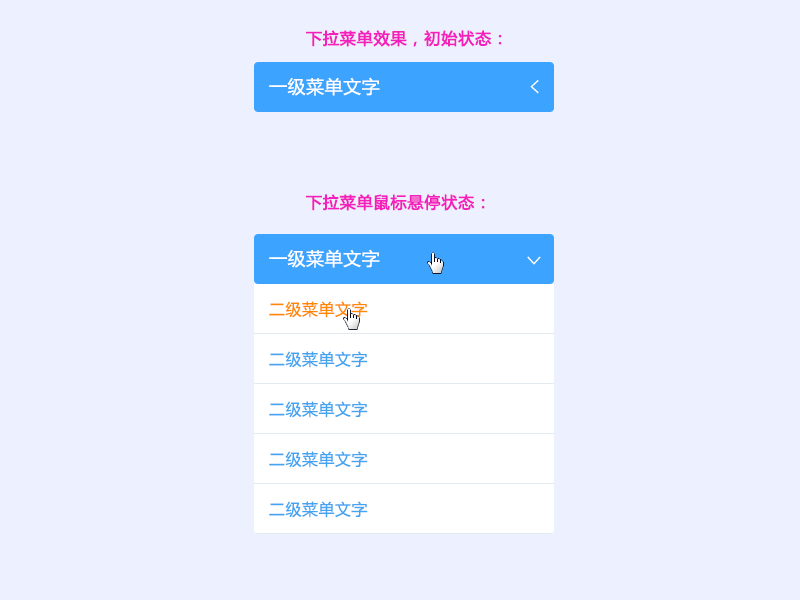
<style>
.page{position:relative;width:800px;height:600px;background:#edf0ff}
.page>*{position:absolute;margin:0}
.t1{font:16px "MicrosoftYaHei";letter-spacing:0.03em;color:#f520bb;font-weight:bold}
.t2{font:18px "MicrosoftYaHei";letter-spacing:0.03em;color:#ffffff}
.t3{font:18px "KaiTi";letter-spacing:0.03em;color:#ffffff}
.t4{font:16px/50px "MicrosoftYaHei";letter-spacing:0.03em;color:#44a4f0}
.t5{font:16px/50px "MicrosoftYaHei";letter-spacing:0.03em;color:#ff8800}
</style>
<div class="page">
<p class="t1" style="left:306px;top:30px;width:196px;height:17px">下拉菜单效果，初始状态：</p>
<p class="t2" style="left:269px;top:77px;width:111px;height:19px">一级菜单文字</p>
<p class="t3" style="left:530px;top:80px;width:9px;height:14px;rotate:180deg">&gt;</p>
<p class="t1" style="left:306px;top:194px;width:179px;height:17px">下拉菜单鼠标悬停状态：</p>
<p class="t2" style="left:269px;top:249px;width:111px;height:19px">一级菜单文字</p>
<p class="t3" style="left:527px;top:256px;width:14px;height:9px;rotate:90deg">&gt;</p>
<p class="t4" style="left:269px;top:301px;width:99px;height:217px;text-align:justify"><span class="t5">二级菜单文字<br></span>二级菜单文字<br>二级菜单文字<br>二级菜单文字<br>二级菜单文字</p>
</div>
